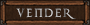
<style>
.page{position:relative;width:90px;height:25px}
.page>*{position:absolute;margin:0}
.t1{font:13px "Mason-Regular";letter-spacing:0.08em;color:#c3c3c3;scale:0.92 1}
</style>
<div class="page">
<p class="t1" style="left:16px;top:8px;width:60px;height:11px">VENDER</p>
</div>
